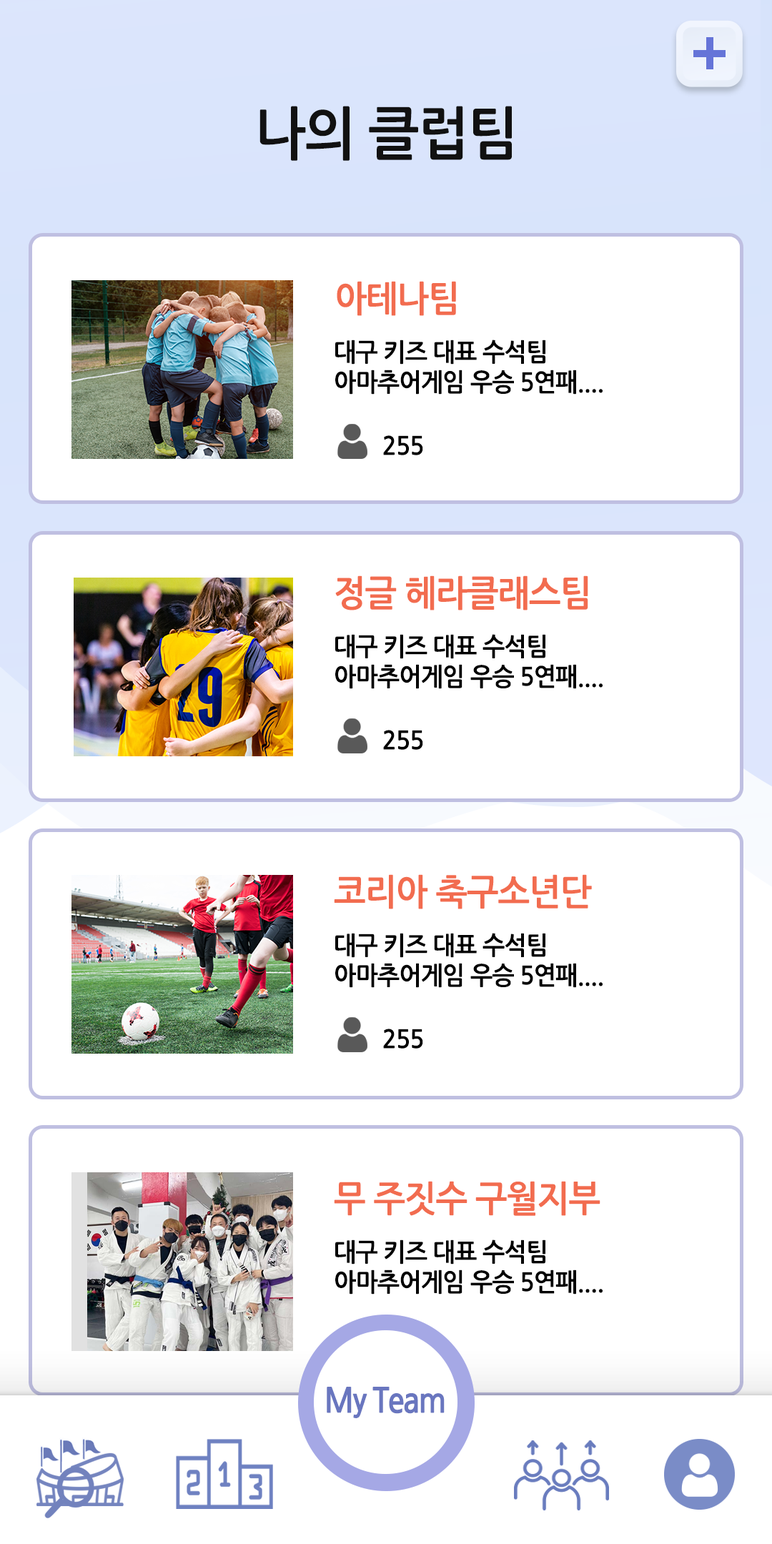
<style>
.page{position:relative;width:772px;height:1544px;background:#ffffff}
.page>*{position:absolute;margin:0}
.t1{font:57.2px "NanumGothicBold";letter-spacing:-0.025em;color:#111111;scale:0.95 1}
.t2{font:35.7px "NanumGothicBold";letter-spacing:-0.025em;color:#f26c4f;scale:0.95 1}
.t3{font:25px "NanumGothicBold";letter-spacing:-0.025em;color:#000000;scale:0.95 1}
</style>
<div class="page">
<p class="t1" style="left:260px;top:106px;width:252px;height:55px">나의 클럽팀</p>
<p class="t2" style="left:337px;top:281px;width:119px;height:35px">아테나팀</p>
<p class="t3" style="left:335px;top:340px;width:268px;height:55px">대구 키즈 대표 수석팀<br>아마추어게임 우승 5연패....</p>
<p class="t3" style="left:383px;top:435px;width:40px;height:20px">255</p>
<p class="t2" style="left:335px;top:576px;width:253px;height:35px">정글 헤라클래스팀</p>
<p class="t3" style="left:335px;top:634px;width:268px;height:55px">대구 키즈 대표 수석팀<br>아마추어게임 우승 5연패....</p>
<p class="t3" style="left:383px;top:730px;width:40px;height:20px">255</p>
<p class="t2" style="left:334px;top:874px;width:258px;height:35px">코리아 축구소년단</p>
<p class="t3" style="left:335px;top:933px;width:268px;height:55px">대구 키즈 대표 수석팀<br>아마추어게임 우승 5연패....</p>
<p class="t3" style="left:383px;top:1029px;width:40px;height:20px">255</p>
<p class="t2" style="left:334px;top:1181px;width:267px;height:35px">무 주짓수 구월지부</p>
<p class="t3" style="left:335px;top:1240px;width:268px;height:55px">대구 키즈 대표 수석팀<br>아마추어게임 우승 5연패....</p>
</div>
